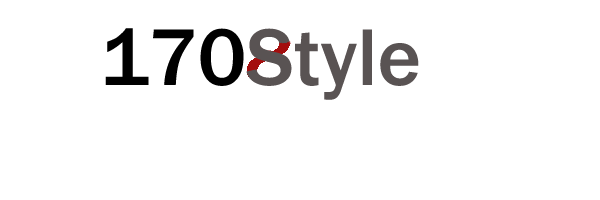
<style>
.page{position:relative;width:600px;height:200px;background:#ffffff}
.page>*{position:absolute;margin:0}
.t1{font:83px "FranklinGothic-Medium";color:#595353}
.t2{font:83px "FranklinGothic-Medium";color:#000000}
</style>
<div class="page">
<p class="t1" style="left:105px;top:28px;width:314px;height:72px"><span class="t2">170</span>Style</p>
</div>
